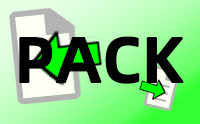
<style>
.page{position:relative;width:200px;height:124px}
.page>*{position:absolute;margin:0}
.t1{font:63.5px "AlibabaPuHuiTiM";color:#010000;font-weight:bold}
</style>
<div class="page">
<p class="t1" style="left:19px;top:36px;width:165px;height:48px">PACK</p>
</div>
